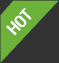
<style>
.page{position:relative;width:59px;height:63px;background:#333333}
.page>*{position:absolute;margin:0}
.t1{font:17px "RobotoCondensed-Bold";color:#ffffff}
</style>
<div class="page">
<p class="t1" style="left:6px;top:7px;width:26px;height:29px;rotate:-47deg">HOT</p>
</div>
